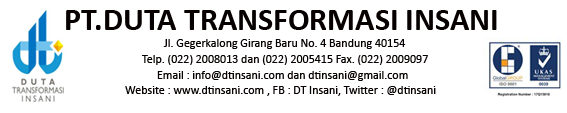
<style>
.page{position:relative;width:567px;height:113px;background:#ffffff}
.page>*{position:absolute;margin:0}
.t1{font:32px "Calibri-Bold";color:#060000}
.t2{font:12px "Calibri";color:#060000}
</style>
<div class="page">
<p class="t1" style="left:66px;top:10px;width:431px;height:20px">PT.DUTA TRANSFORMASI INSANI</p>
<p class="t2" style="left:163px;top:39px;width:243px;height:10px">Jl. Gegerkalong Girang Baru No. 4 Bandung 40154</p>
<p class="t2" style="left:142px;top:55px;width:286px;height:10px">Telp. (022) 2008013 dan (022) 2005415 Fax. (022) 2009097</p>
<p class="t2" style="left:157px;top:71px;width:251px;height:10px">Email : info@dtinsani.com dan dtinsani@gmail.com</p>
<p class="t2" style="left:125px;top:86px;width:311px;height:10px">Website : www.dtinsani.com , FB : DT Insani, Twitter : @dtinsani</p>
</div>
